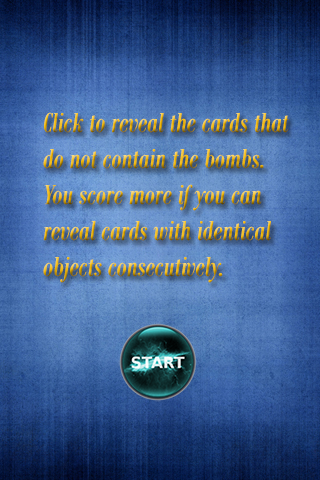
<style>
.page{position:relative;width:320px;height:480px}
.page>*{position:absolute;margin:0}
.t1{font:30px "BodoniMTCondensed-Italic"}
</style>
<div class="page">
<p class="t1" style="left:43px;top:112px;width:246px;height:171px">Click to reveal the cards that do not contain the bombs. You score more if you can reveal cards with identical objects consecutively.</p>
</div>
